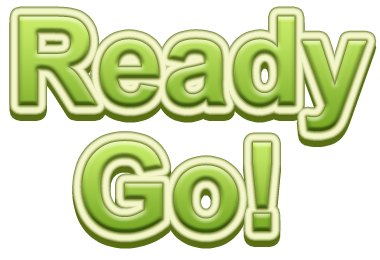
<style>
.page{position:relative;width:380px;height:260px;background:#ffffff}
.page>*{position:absolute;margin:0}
.t1{font:123.2px "Arial-BoldMT";scale:0.97 1}
</style>
<div class="page">
<p class="t1" style="left:19px;top:16px;width:348px;height:115px">Ready</p>
<p class="t1" style="left:19px;top:22px;width:348px;height:115px">Ready</p>
<p class="t1" style="left:82px;top:147px;width:189px;height:92px">Go!</p>
<p class="t1" style="left:82px;top:141px;width:189px;height:92px">Go!</p>
</div>
